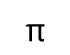
<style>
.page{position:relative;width:70px;height:55px;background:#ffffff}
.page>*{position:absolute;margin:0}
.t1{font:31.8px "DroidSans";color:#000000}
</style>
<div class="page">
<p class="t1" style="left:25px;top:24px;width:20px;height:18px">π</p>
</div>
